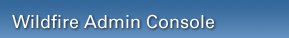
<style>
.page{position:relative;width:289px;height:38px}
.page>*{position:absolute;margin:0}
.t1{font:18px "Univers";color:#ffffff}
</style>
<div class="page">
<p class="t1" style="left:12px;top:14px;width:202px;height:15px">Wildfire Admin Console</p>
</div>
